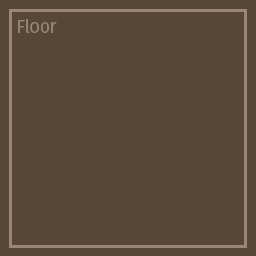
<style>
.page{position:relative;width:256px;height:256px;background:#584736}
.page>*{position:absolute;margin:0}
.t1{font:18px "FiraSans-Regular";letter-spacing:-0.02em;color:#998675}
</style>
<div class="page">
<p class="t1" style="left:18px;top:19px;width:39px;height:14px">Floor</p>
</div>
